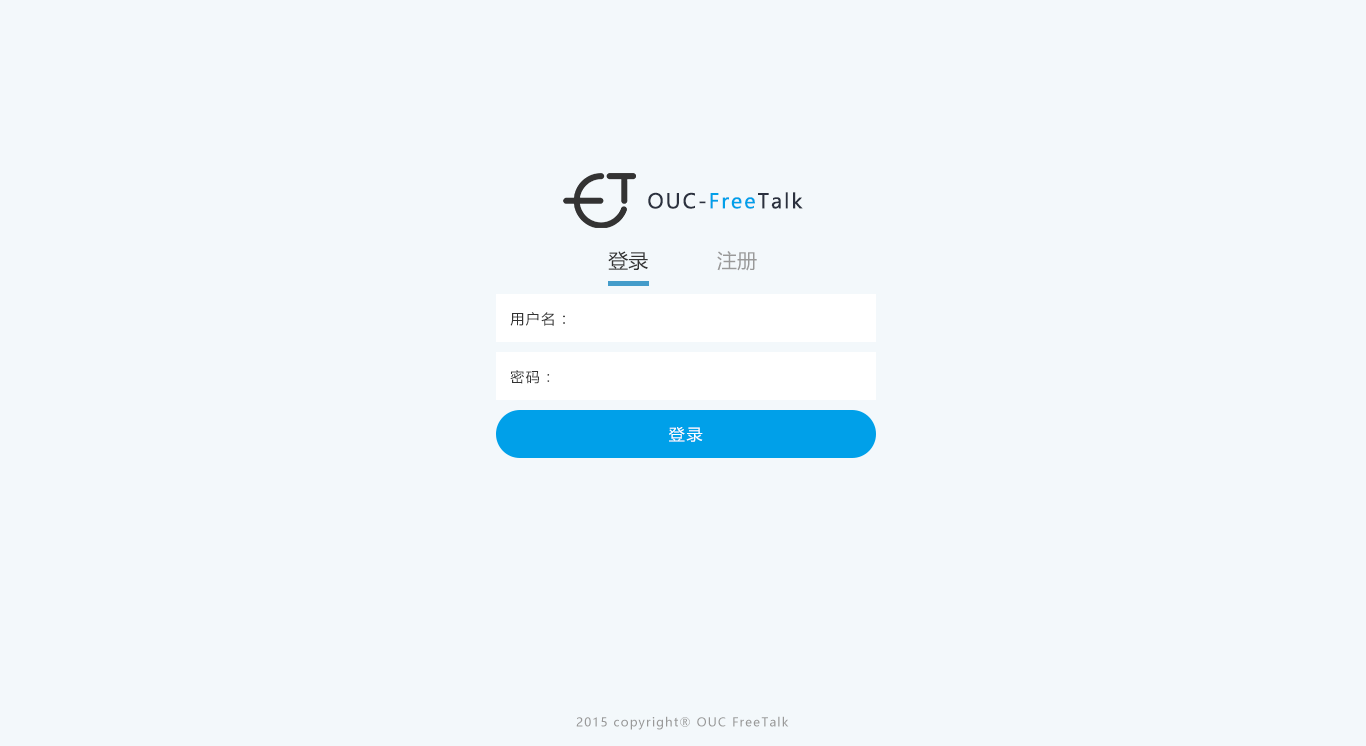
<style>
.page{position:relative;width:1366px;height:746px;background:#f3f8fb}
.page>*{position:absolute;margin:0}
.t1{font:20px "MicrosoftYaHei";letter-spacing:0.1em;color:#2b313f}
.t2{font:20px "MicrosoftYaHei";letter-spacing:0.1em;color:#00a0e9}
.t3{font:20px "MicrosoftYaHei";color:#333333}
.t4{font:20px "MicrosoftYaHei";color:#999999}
.t5{font:14px "MicrosoftYaHei";letter-spacing:0.1em;color:#333333}
.t6{font:15px "MicrosoftYaHei";letter-spacing:0.1em;color:#333333}
.t7{font:16px "MicrosoftYaHei";letter-spacing:0.1em;color:#ffffff}
.t8{font:12px "MicrosoftYaHei";letter-spacing:0.1em;color:#999999}
</style>
<div class="page">
<p class="t1" style="left:648px;top:192px;width:155px;height:17px">OUC-<span class="t2">Free</span>Talk</p>
<p class="t3" style="left:608px;top:251px;width:40px;height:19px">登录</p>
<p class="t4" style="left:717px;top:251px;width:40px;height:20px">注册</p>
<p class="t5" style="left:510px;top:312px;width:55px;height:14px">用户名<span class="t6">：</span></p>
<p class="t5" style="left:510px;top:370px;width:40px;height:14px">密码：</p>
<p class="t7" style="left:669px;top:427px;width:34px;height:15px">登录</p>
<p class="t8" style="left:576px;top:716px;width:213px;height:14px">2015 copyright® OUC FreeTalk</p>
</div>
